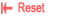
<style>
.page{position:relative;width:78px;height:16px;background:#ffffff}
.page>*{position:absolute;margin:0}
.t1{font:13px "ArialMT";color:#fa5f5f;font-weight:bold;scale:0.75 1}
</style>
<div class="page">
<p class="t1" style="left:18px;top:1px;width:27px;height:15px">Reset</p>
</div>
